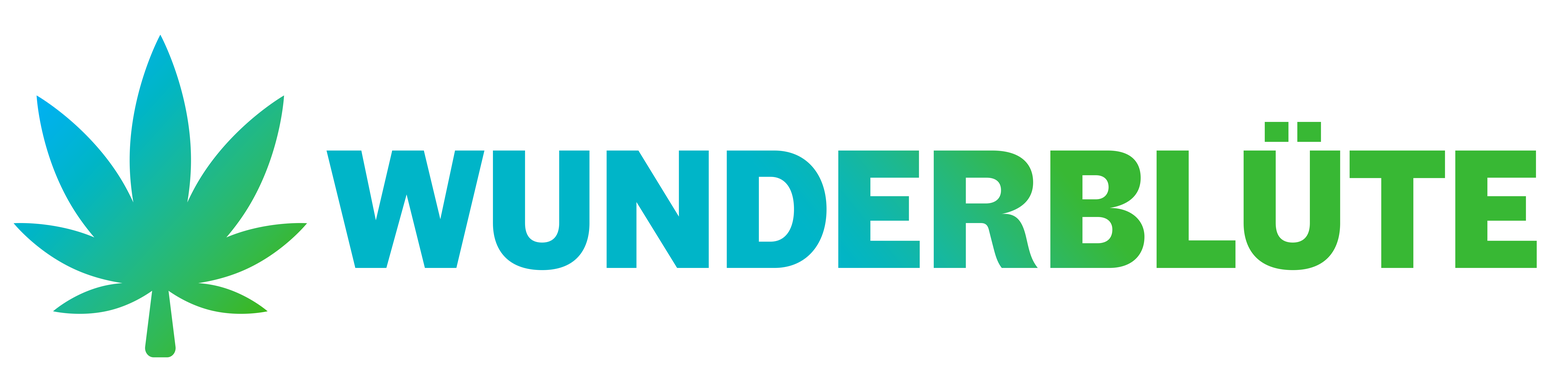
<style>
.page{position:relative;width:1568px;height:392px;background:#ffffff}
.page>*{position:absolute;margin:0}
.t1{font:176.4px "Maple-Bold";scale:0.85 1}
</style>
<div class="page">
<p class="t1" style="left:327px;top:122px;width:1210px;height:148px">WUNDERBLÜTE</p>
</div>
